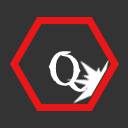
<style>
.page{position:relative;width:128px;height:128px;background:#333333}
.page>*{position:absolute;margin:0}
.t1{font:49.9px "PiecesofEight";color:#ffffff}
</style>
<div class="page">
<p class="t1" style="left:48px;top:51px;width:39px;height:41px">Q</p>
</div>
